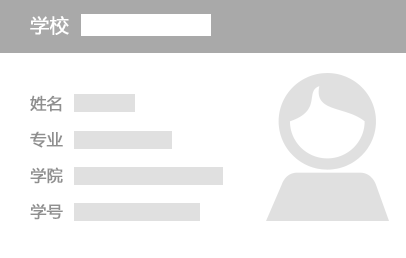
<style>
.page{position:relative;width:406px;height:258px;background:#ffffff}
.page>*{position:absolute;margin:0}
.t1{font:19px "MicrosoftYaHei";color:#ffffff;font-weight:bold}
.t2{font:16px/36px "MicrosoftYaHei";color:#8f8f8f;font-weight:bold}
</style>
<div class="page">
<p class="t1" style="left:30px;top:16px;width:39px;height:19px">学校</p>
<p class="t2" style="left:30px;top:95px;width:33px;height:125px">姓名<br>专业<br>学院<br>学号</p>
</div>
